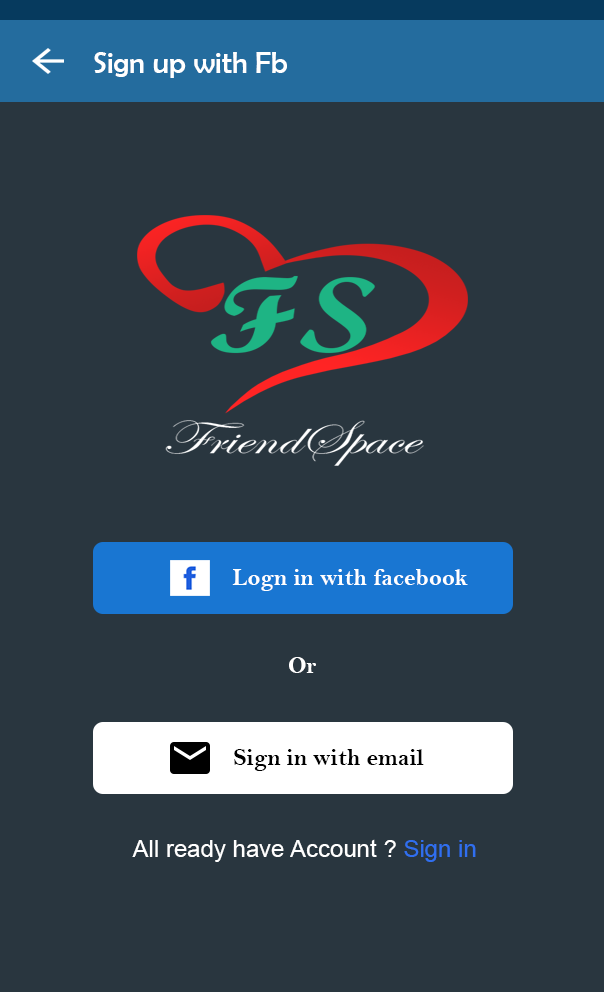
<style>
.page{position:relative;width:604px;height:992px;background:#29363f}
.page>*{position:absolute;margin:0}
.t1{font:30px "BerlinSansFB-Reg";color:#ffffff}
.t2{font:24px "BellMTBold";color:#ffffff}
.t3{font:24px "BellMTBold";color:#000000}
.t4{font:24px "ArialMT";color:#ffffff}
.t5{font:24px "ArialMT";color:#306fef}
</style>
<div class="page">
<p class="t1" style="left:94px;top:52px;width:193px;height:26px">Sign up with Fb</p>
<p class="t2" style="left:232px;top:569px;width:236px;height:22px">Logn in with facebook</p>
<p class="t2" style="left:289px;top:657px;width:27px;height:16px">Or</p>
<p class="t3" style="left:234px;top:749px;width:190px;height:22px">Sign in with email</p>
<p class="t4" style="left:132px;top:839px;width:344px;height:23px">All ready have Account ? <span class="t5">Sign in</span></p>
</div>
